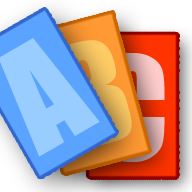
<style>
.page{position:relative;width:192px;height:192px}
.page>*{position:absolute;margin:0}
.t1{font:133.3px "Impact";color:#99ccff}
.t2{font:133.3px "Impact"}
</style>
<div class="page">
<p class="t1" style="left:0px;top:38px;width:100px;height:119px;rotate:-30deg">A</p>
<p class="t2" style="left:99px;top:53px;width:66px;height:109px">C</p>
</div>
